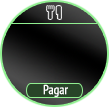
<style>
.page{position:relative;width:109px;height:107px}
.page>*{position:absolute;margin:0}
.t1{font:13px "PTSans-Narrow";color:#ffffff}
</style>
<div class="page">
<p class="t1" style="left:43px;top:84px;width:25px;height:13px">Pagar</p>
</div>
